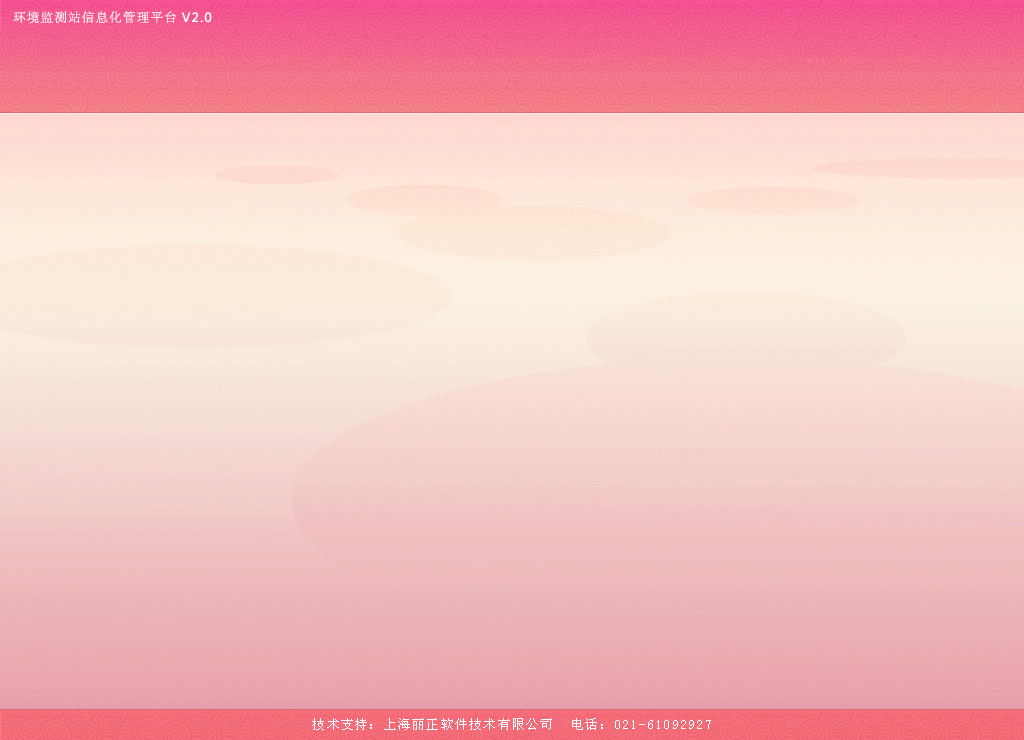
<style>
.page{position:relative;width:1024px;height:740px}
.page>*{position:absolute;margin:0}
.t1{font:12.5px "AdobeSongStd-Light";letter-spacing:0.1em;color:#ffffff}
.t2{font:12.5px "MicrosoftYaHei";letter-spacing:0.1em;color:#ffffff}
.t3{font:12.5px "SimSun";letter-spacing:0.1em;color:#ffffff}
</style>
<div class="page">
<p class="t1" style="left:13px;top:11px;width:199px;height:13px">环境监测站信息化管理平台 <span class="t2">V2.0</span></p>
<p class="t3" style="left:312px;top:718px;width:399px;height:12px">技术支持：上海丽正软件技术有限公司  电话：021-61092927</p>
</div>
